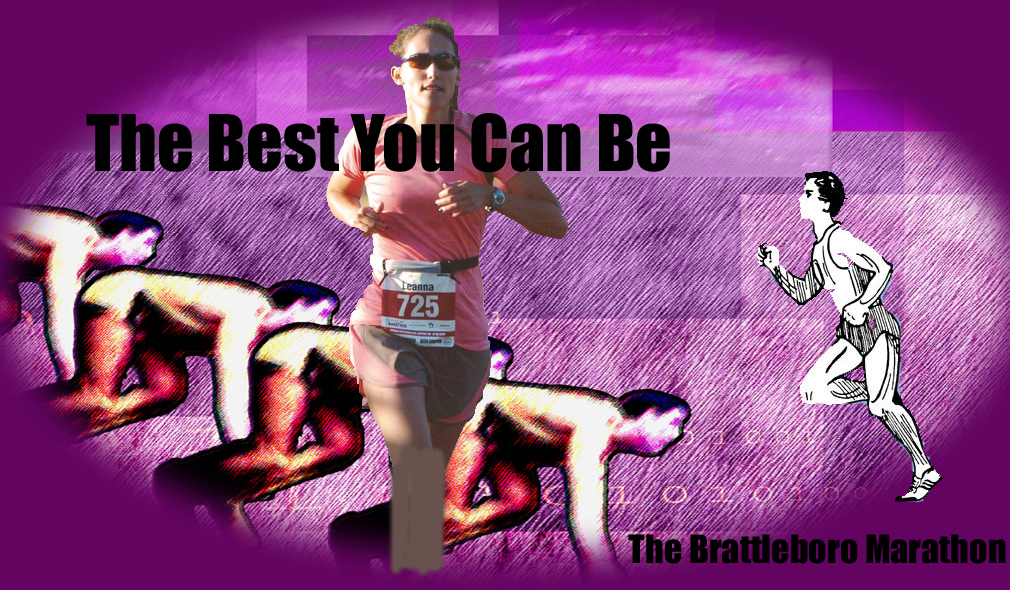
<style>
.page{position:relative;width:1010px;height:590px}
.page>*{position:absolute;margin:0}
.t1{font:72px "Impact";color:#000000}
.t2{font:36px "Impact";color:#000000}
</style>
<div class="page">
<p class="t1" style="left:86px;top:113px;width:584px;height:60px">The Best You Can Be</p>
<p class="t2" style="left:628px;top:534px;width:378px;height:30px">The Brattleboro Marathon</p>
</div>
